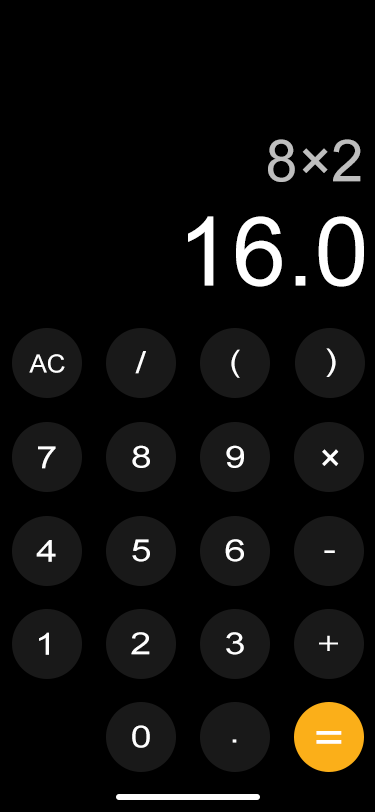
<style>
.page{position:relative;width:375px;height:812px;background:#000000}
.page>*{position:absolute;margin:0}
.t1{font:57.9px "ArialMT";color:#bebebe;text-transform:uppercase}
.t2{font:96.2px "ArialMT";color:#ffffff;text-transform:uppercase}
.t3{font:30.4px "ArialMT";color:#ffffff;text-transform:uppercase;scale:1.24 1}
.t4{font:30.4px "ArialMT";color:#ffffff;text-transform:uppercase;scale:1.13 1}
.t5{font:24.9px "ArialMT";color:#ffffff;text-transform:uppercase;scale:1.05 1}
.t6{font:39px "ArialMT";color:#ffffff;text-transform:uppercase;scale:0.97 1}
.t7{font:30.4px "HKGrotesk-Medium";color:#ffffff;text-transform:uppercase;scale:1.24 1}
.t8{font:42.2px "ArialMT";color:#ffffff;text-transform:uppercase;scale:1.24 1}
</style>
<div class="page">
<p class="t1" style="left:268px;top:139px;width:93px;height:43px">8×2</p>
<p class="t2" style="left:188px;top:216px;width:176px;height:71px">16.0</p>
<p class="t3" style="left:135px;top:351px;width:11px;height:23px">/</p>
<p class="t4" style="left:231px;top:349px;width:9px;height:29px">(</p>
<p class="t3" style="left:326px;top:348px;width:10px;height:29px">)</p>
<p class="t5" style="left:29px;top:354px;width:36px;height:19px">ac</p>
<p class="t3" style="left:38px;top:446px;width:18px;height:23px">7</p>
<p class="t3" style="left:132px;top:445px;width:18px;height:23px">8</p>
<p class="t3" style="left:226px;top:445px;width:18px;height:23px">9</p>
<p class="t6" style="left:322px;top:449px;width:17px;height:17px">×</p>
<p class="t3" style="left:36px;top:540px;width:20px;height:22px">4</p>
<p class="t3" style="left:132px;top:539px;width:18px;height:23px">5</p>
<p class="t3" style="left:225px;top:539px;width:19px;height:23px">6</p>
<p class="t3" style="left:324px;top:550px;width:11px;height:3px">-</p>
<p class="t3" style="left:39px;top:632px;width:10px;height:23px">1</p>
<p class="t3" style="left:131px;top:632px;width:19px;height:23px">2</p>
<p class="t3" style="left:226px;top:632px;width:18px;height:23px">3</p>
<p class="t7" style="left:319px;top:635px;width:19px;height:16px">+</p>
<p class="t3" style="left:132px;top:725px;width:18px;height:23px">0</p>
<p class="t8" style="left:316px;top:731px;width:26px;height:13px">=</p>
<p class="t3" style="left:232px;top:739px;width:5px;height:4px">.</p>
</div>
